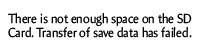
<style>
.page{position:relative;width:200px;height:50px;background:#ffffff}
.page>*{position:absolute;margin:0}
.t1{font:13.2px "Amira-Roman";color:#000000;scale:0.91 1}
</style>
<div class="page">
<p class="t1" style="left:8px;top:13px;width:184px;height:25px;text-align:center">There is not enough space on the SD Card. Transfer of save data has failed.</p>
</div>
